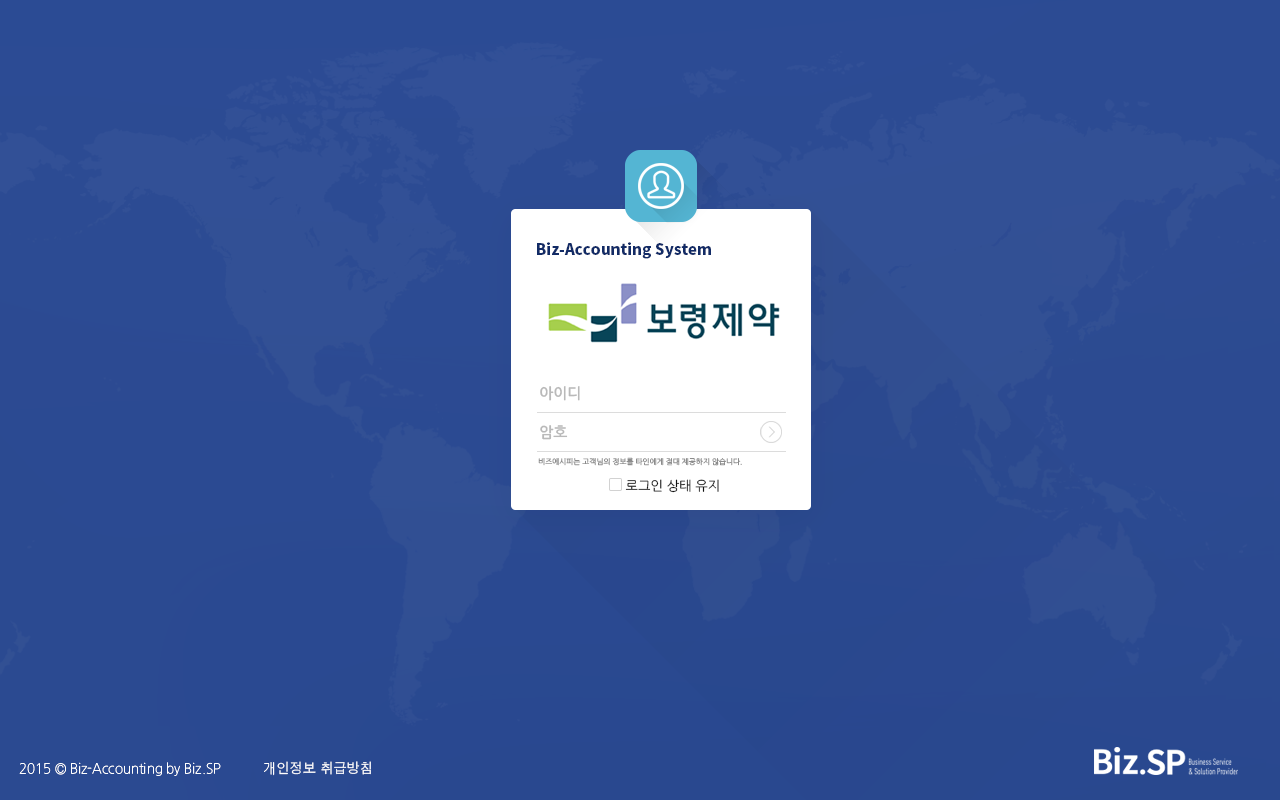
<style>
.page{position:relative;width:1280px;height:800px}
.page>*{position:absolute;margin:0}
.t1{font:15.1px "NotoSansCJKkr-Black";color:#122b66}
.t2{font:14.9px "NanumGothicBold";color:#b9b9b9}
.t3{font:7.5px "NanumGothic";color:#8c8c8c}
.t4{font:13.3px "NanumGothic";color:#111111}
.t5{font:14px "AppleGothic";color:#ffffff;scale:0.94 1}
.t6{font:14px "NanumGothicOTFLight";color:#ffffff;scale:0.94 1}
</style>
<div class="page">
<p class="t1" style="left:537px;top:242px;width:174px;height:17px">Biz-Accounting System</p>
<p class="t2" style="left:540px;top:386px;width:40px;height:15px">아이디</p>
<p class="t2" style="left:540px;top:425px;width:28px;height:15px">암호</p>
<p class="t3" style="left:538px;top:457px;width:204px;height:9px">비즈에시피는 고객님의 정보를 타인에게 절대 제공하지 않습니다.</p>
<p class="t4" style="left:625px;top:479px;width:94px;height:14px">로그인 상태 유지</p>
<p class="t5" style="left:264px;top:761px;width:107px;height:15px"><span class="t6">개</span>인정보 취급방침</p>
<p class="t6" style="left:19px;top:762px;width:202px;height:14px">2015 © Biz-Accounting by Biz.SP</p>
</div>
